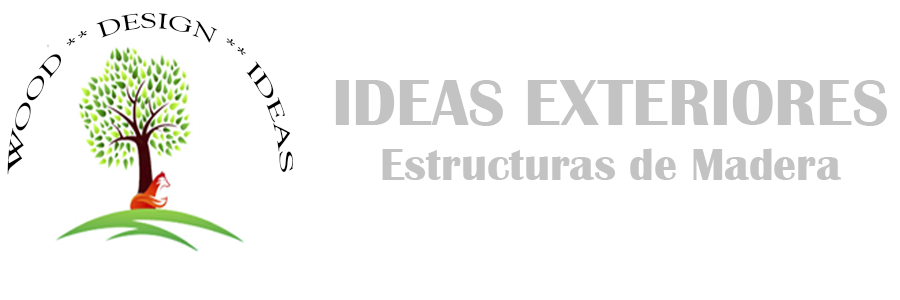
<style>
.page{position:relative;width:900px;height:300px;background:#ffffff}
.page>*{position:absolute;margin:0}
.t1{font:22.9px "GoudyOldStyleT-Regular";color:#000000;scale:0.88 1}
.t2{font:45.8px "BritannicBold";color:#c3c3c3}
.t3{font:66.7px "BritannicBold";color:#c3c3c3}
</style>
<div class="page">
<p class="t1" style="left:7px;top:13px;width:286px;height:162px">WOOD ** DESIGN ** IDEAS</p>
<p class="t2" style="left:335px;top:80px;width:552px;height:100px;text-align:center"><span class="t3">IDEAS EXTERIORES<br></span>Estructuras de Madera</p>
</div>
